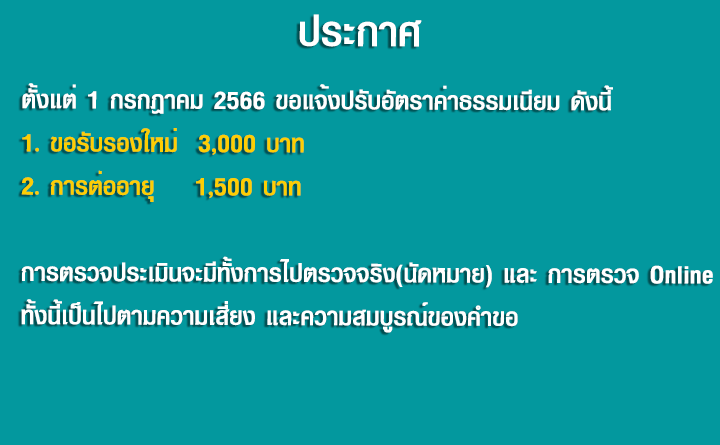
<style>
.page{position:relative;width:720px;height:445px;background:#03989e}
.page>*{position:absolute;margin:0}
.t1{font:60px "PSLDisplayCSBold";color:#ffffff}
.t2{font:36px "PSLDisplayCSBold";color:#ffffff}
.t3{font:36px "PSLDisplayCSBold";color:#fdce03}
</style>
<div class="page">
<p class="t1" style="left:299px;top:14px;width:123px;height:33px">ประกาศ</p>
<p class="t2" style="left:21px;top:83px;width:692px;height:250px">ตั้งแต่ 1 กรกฎาคม 2566 ขอแจ้งปรับอัตราค่าธรรมเนียม ดังนี้<br><span class="t3">1. ขอรับรองใหม่  3,000 บาท <br>2. การต่ออายุ    1,500 บาท<br></span><br>การตรวจประเมินจะมีทั้งการไปตรวจจริง(นัดหมาย) และ การตรวจ Online<br>ทั้งนี้เป็นไปตามความเสี่ยง และความสมบูรณ์ของคำขอ</p>
</div>
